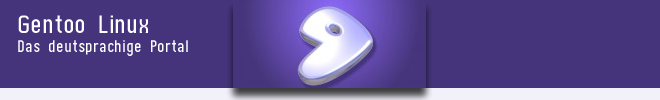
<style>
.page{position:relative;width:660px;height:100px;background:#45347b}
.page>*{position:absolute;margin:0}
.t1{font:32px/18.7px "ChicaMono";color:#ffffff}
.t2{font:48px/18.7px "ChicaMono";color:#ffffff}
</style>
<div class="page">
<p class="t1" style="left:18px;top:15px;width:170px;height:41px"><span class="t2">Gentoo Linux<br></span>Das deutsprachige Portal</p>
</div>
